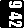
<style>
.page{position:relative;width:24px;height:28px;background:#000000}
.page>*{position:absolute;margin:0}
.t1{font:16px "Impact";color:#ffffff}
</style>
<div class="page">
<p class="t1" style="left:9px;top:1px;width:13px;height:26px;rotate:90deg">9 42</p>
</div>
